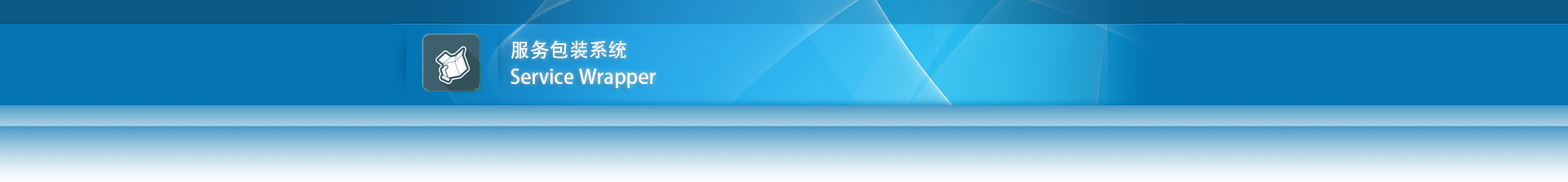
<style>
.page{position:relative;width:1568px;height:182px;background:#0373b2}
.page>*{position:absolute;margin:0}
.t1{font:19.6px/26.5px "AdobeHeitiStd-Regular";color:#ffffff}
</style>
<div class="page">
<p class="t1" style="left:510px;top:40px;width:146px;height:48px">服务包装系统<br>Service Wrapper</p>
</div>
